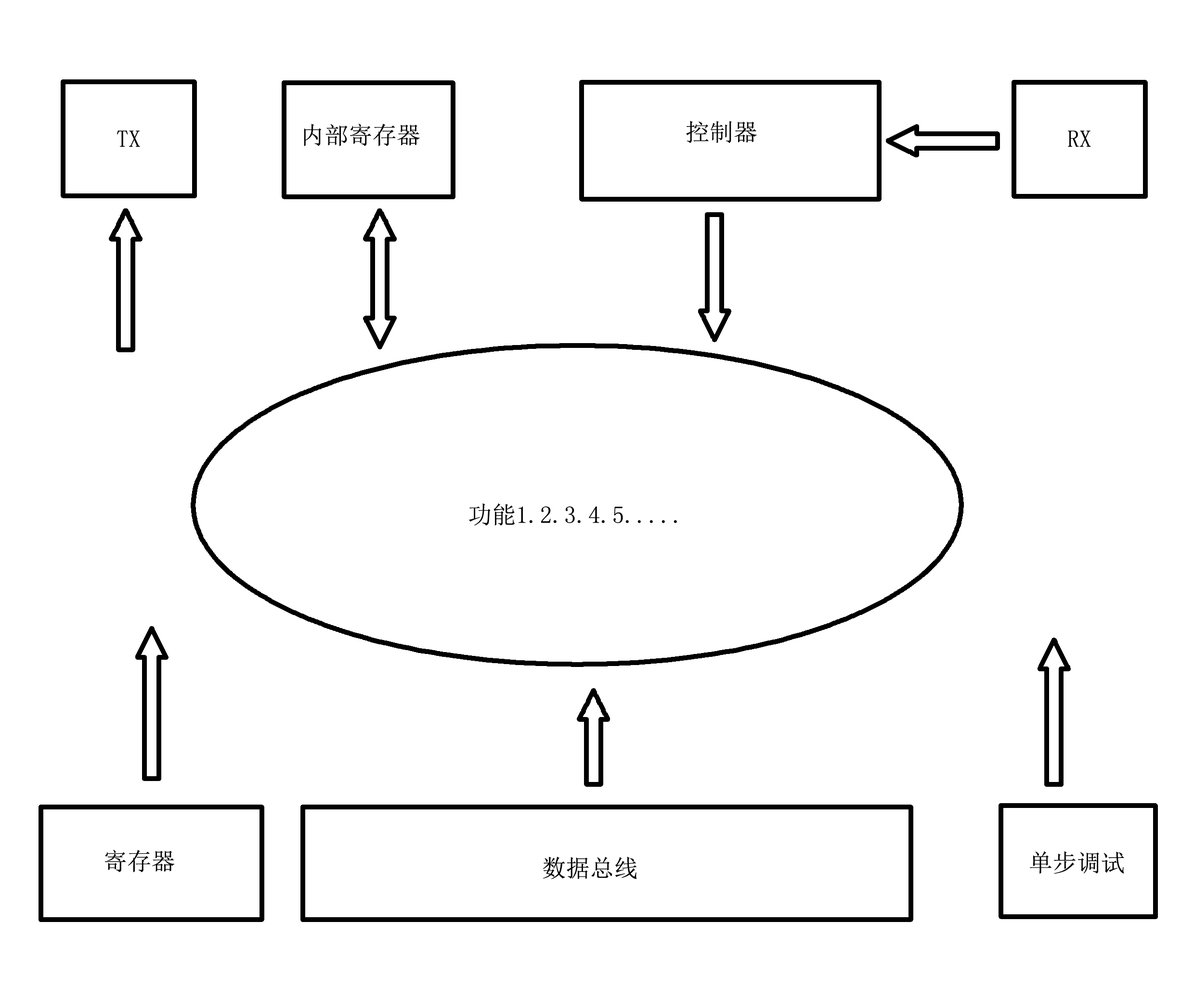
<style>
.page{position:relative;width:1194px;height:999px;background:#ffffff}
.page>*{position:absolute;margin:0}
.t1{font:24.1px "SimSun";color:#000000}
</style>
<div class="page">
<p class="t1" style="left:304px;top:124px;width:116px;height:22px">内部寄存器</p>
<p class="t1" style="left:686px;top:121px;width:71px;height:22px">控制器</p>
<p class="t1" style="left:117px;top:130px;width:23px;height:17px">TX</p>
<p class="t1" style="left:1067px;top:130px;width:24px;height:17px">RX</p>
<p class="t1" style="left:469px;top:503px;width:208px;height:23px">功能1.2.3.4.5.....</p>
<p class="t1" style="left:104px;top:850px;width:71px;height:23px">寄存器</p>
<p class="t1" style="left:542px;top:857px;width:95px;height:22px">数据总线</p>
<p class="t1" style="left:1029px;top:851px;width:95px;height:23px">单步调试</p>
</div>
